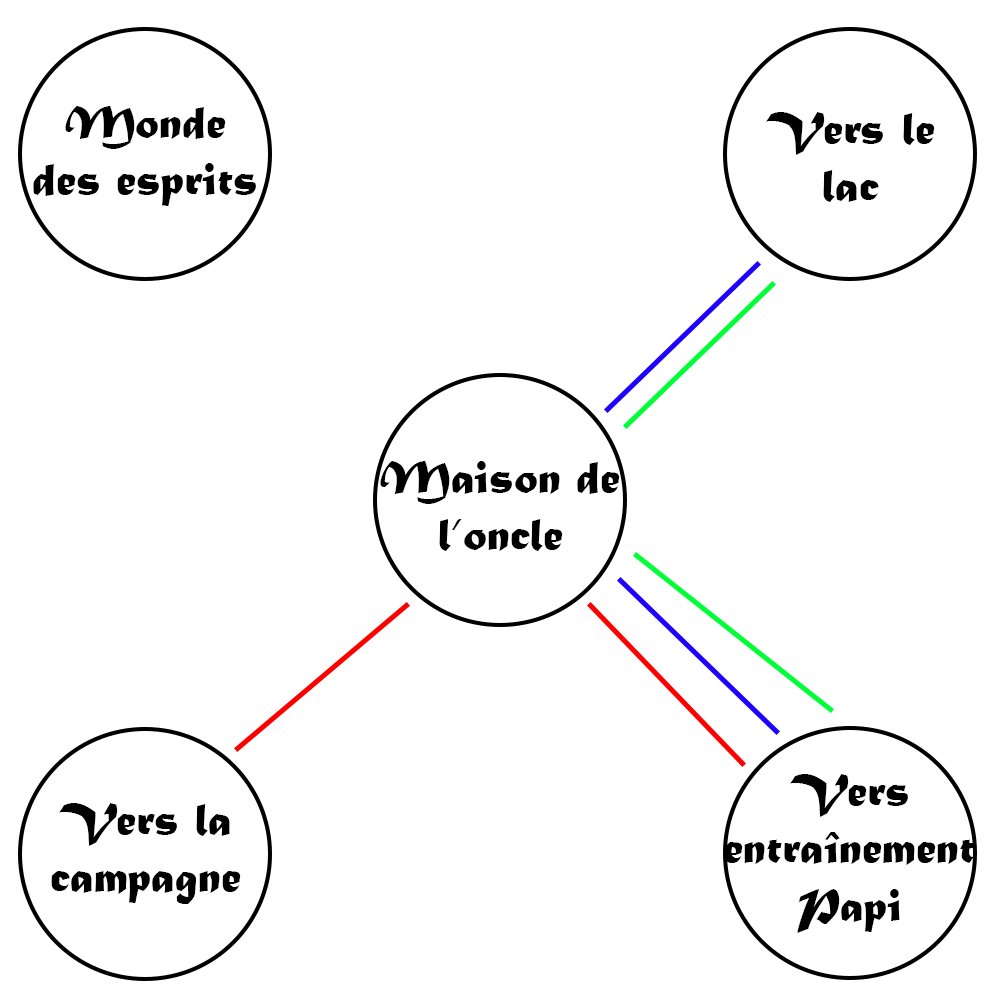
<style>
.page{position:relative;width:1000px;height:1000px;background:#ffffff}
.page>*{position:absolute;margin:0}
.t1{font:48px "MaturaMTScriptCapitals";color:#000000}
</style>
<div class="page">
<p class="t1" style="left:33px;top:106px;width:223px;height:100px;text-align:center">Monde<br>des esprits</p>
<p class="t1" style="left:766px;top:112px;width:169px;height:90px;text-align:center">Vers le<br>lac</p>
<p class="t1" style="left:380px;top:461px;width:240px;height:90px;text-align:center">Maison de<br>l’oncle</p>
<p class="t1" style="left:724px;top:774px;width:251px;height:159px;text-align:center">Vers<br>entraînement<br>Papi</p>
<p class="t1" style="left:51px;top:803px;width:190px;height:101px;text-align:center">Vers la<br>campagne</p>
</div>
